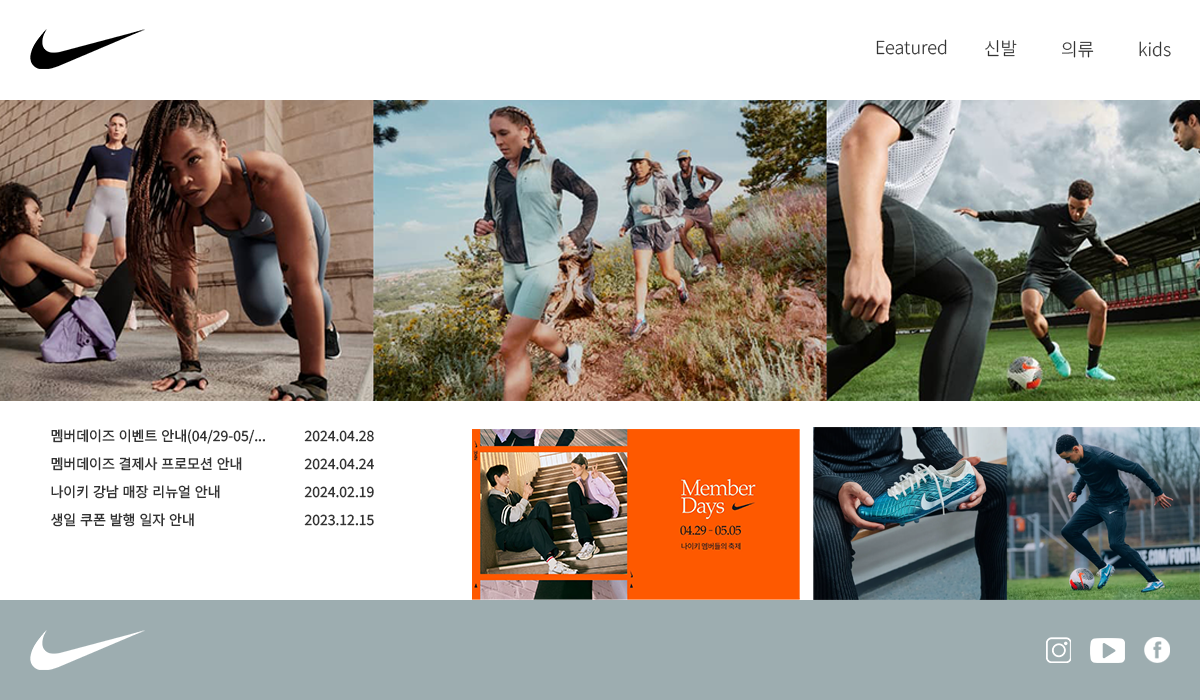
<style>
.page{position:relative;width:1200px;height:700px;background:#ffffff}
.page>*{position:absolute;margin:0}
.t1{font:18px "NotoSansKR-Light";color:#333333}
.t2{font:14px/28px "NotoSansKR-Regular";color:#333333}
</style>
<div class="page">
<p class="t1" style="left:876px;top:39px;width:71px;height:16px">Eeatured</p>
<p class="t1" style="left:985px;top:40px;width:32px;height:17px">신발</p>
<p class="t1" style="left:1062px;top:41px;width:32px;height:17px">의류</p>
<p class="t1" style="left:1139px;top:41px;width:32px;height:16px">kids</p>
<p class="t2" style="left:51px;top:429px;width:214px;height:98px">멤버데이즈 이벤트 안내(04/29-05/...<br>멤버데이즈 결제사 프로모션 안내<br>나이키 강남 매장 리뉴얼 안내<br>생일 쿠폰 발행 일자 안내</p>
<p class="t2" style="left:304px;top:430px;width:70px;height:96px">2024.04.28<br>2024.04.24<br>2024.02.19<br>2023.12.15</p>
</div>
